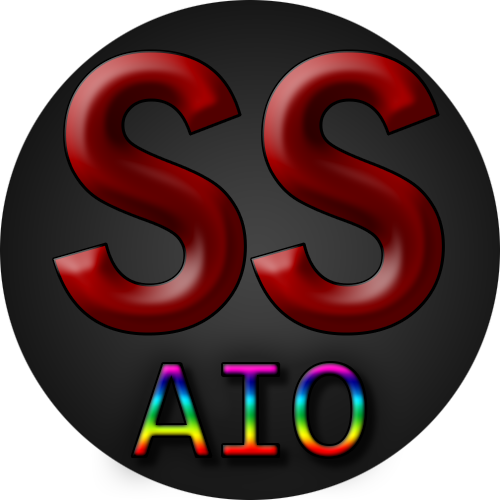
<style>
.page{position:relative;width:500px;height:500px}
.page>*{position:absolute;margin:0}
.t1{font:409.5px "FranklinGothic-DemiCond";color:#000000;font-variant:small-caps}
.t2{font:143.8px "Consolas";color:#000000;font-variant:small-caps}
</style>
<div class="page">
<p class="t1" style="left:53px;top:51px;width:193px;height:283px">S</p>
<p class="t1" style="left:251px;top:51px;width:193px;height:283px">S</p>
<p class="t2" style="left:132px;top:363px;width:234px;height:94px">AIO</p>
</div>
